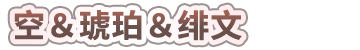
<style>
.page{position:relative;width:360px;height:50px;background:#ffffff}
.page>*{position:absolute;margin:0}
.t1{font:32px "SourceHanSansSC-Bold";font-weight:bold}
</style>
<div class="page">
<p class="t1" style="left:14px;top:9px;width:228px;height:32px">空＆琥珀＆绯文</p>
</div>
